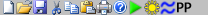
<style>
.page{position:relative;width:208px;height:15px;background:#c0c0c0}
.page>*{position:absolute;margin:0}
.t1{font:13px "Tahoma";color:#000000;font-variant:small-caps;font-weight:bold}
</style>
<div class="page">
<p class="t1" style="left:177px;top:2px;width:15px;height:11px">PP</p>
</div>
